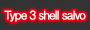
<style>
.page{position:relative;width:90px;height:30px;background:#333333}
.page>*{position:absolute;margin:0}
.t1{font:12px "FutoGoB101Pr5-Bold";letter-spacing:-0.08em;color:#ffffff}
</style>
<div class="page">
<p class="t1" style="left:4px;top:10px;width:82px;height:12px">Type 3 shell salvo</p>
</div>
